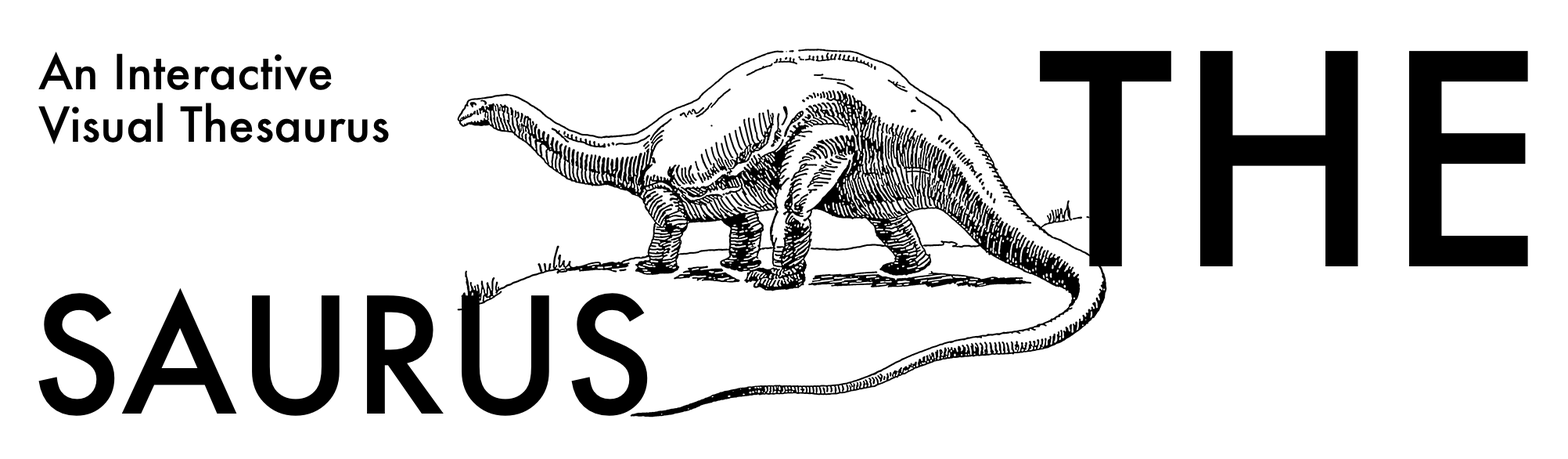
<style>
.page{position:relative;width:1568px;height:459px;background:#ffffff}
.page>*{position:absolute;margin:0}
.t1{font:46.9px/26.1px "Futura-Medium";color:#000000}
.t2{font:285.3px "Futura-Medium";color:#000000}
.t3{font:156.5px "Futura-Medium";color:#000000}
</style>
<div class="page">
<p class="t1" style="left:38px;top:52px;width:351px;height:93px">An Interactive(<br>Visual Thesaurus</p>
<p class="t2" style="left:1040px;top:51px;width:488px;height:215px">THE</p>
<p class="t3" style="left:38px;top:287px;width:610px;height:128px">SAURUS</p>
</div>
